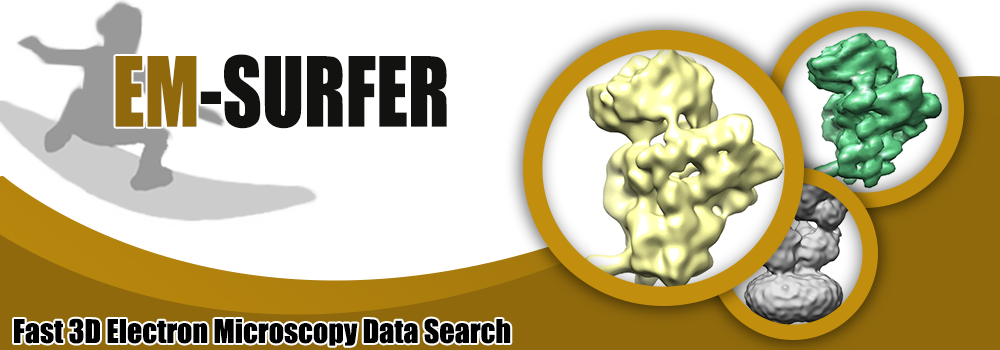
<style>
.page{position:relative;width:1000px;height:350px;background:#ffffff}
.page>*{position:absolute;margin:0}
.t1{font:89.3px "Impact";color:#121211;scale:0.86 1}
.t2{font:89.3px "Impact";color:#8f690c;scale:0.86 1}
.t3{font:30px "Impact";color:#000000}
</style>
<div class="page">
<p class="t1" style="left:115px;top:54px;width:332px;height:75px"><span class="t2">EM</span>-SURFER</p>
<p class="t3" style="left:14px;top:318px;width:497px;height:28px">Fast 3D Electron Microscopy Data Search</p>
</div>
